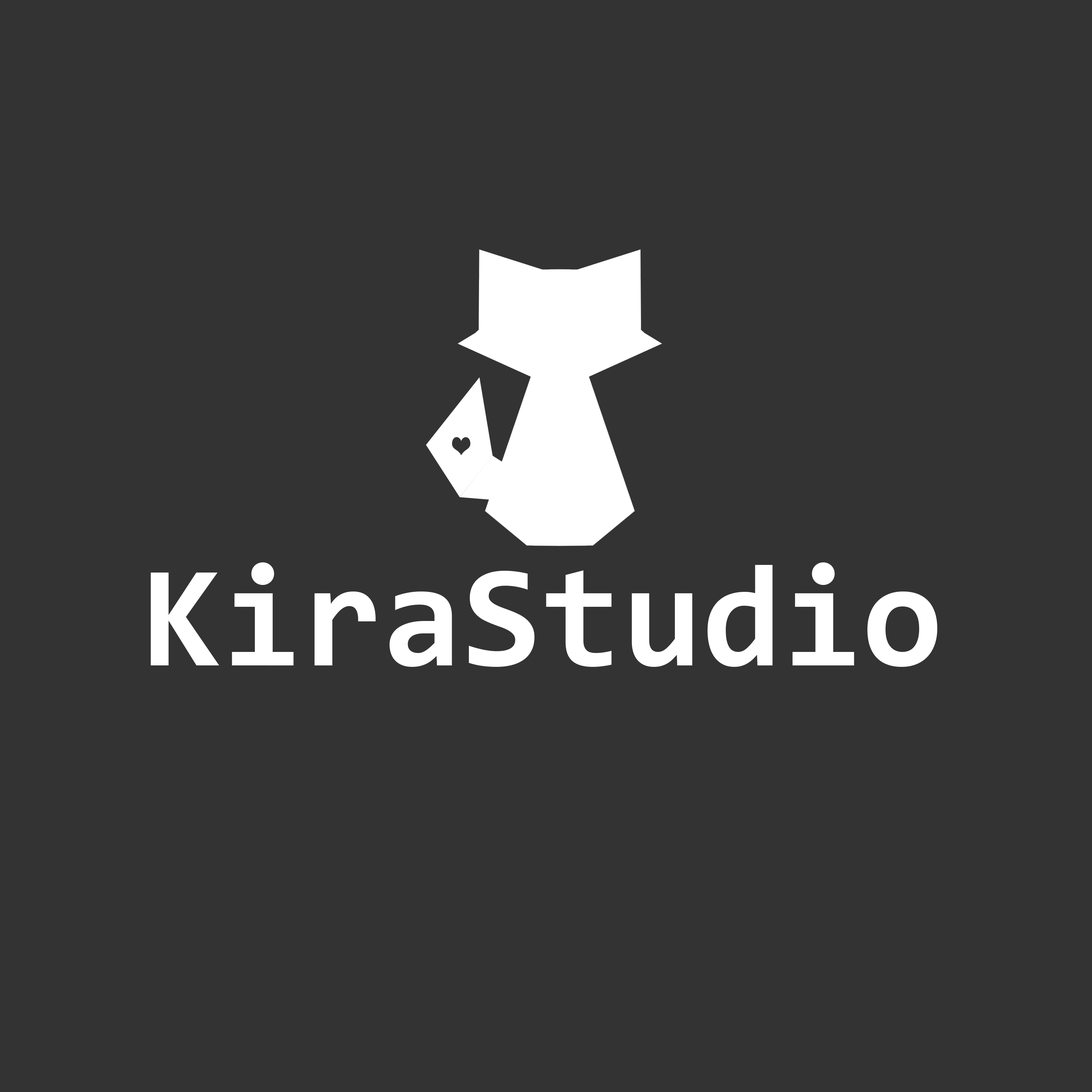
<style>
.page{position:relative;width:1092px;height:1092px;background:#333333}
.page>*{position:absolute;margin:0}
.t1{font:145.7px "Consolas-Bold";color:#ffffff}
</style>
<div class="page">
<p class="t1" style="left:151px;top:562px;width:786px;height:105px">KiraStudio</p>
</div>
